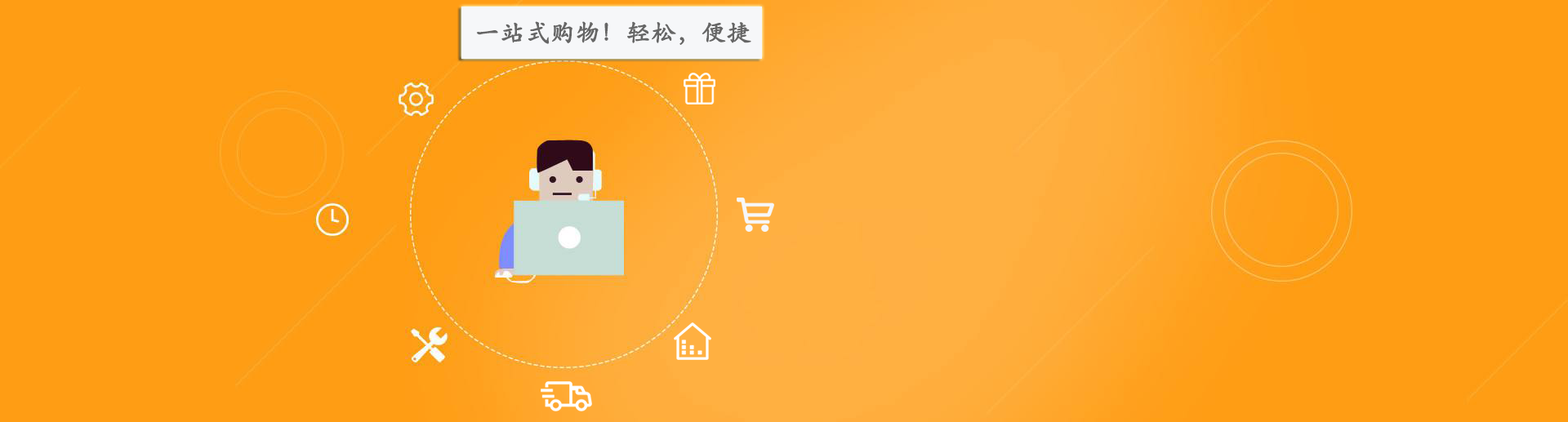
<style>
.page{position:relative;width:1568px;height:422px;background:#ff9d14}
.page>*{position:absolute;margin:0}
.t1{font:24.5px "STKaiti";color:#666666;font-weight:bold}
</style>
<div class="page">
<p class="t1" style="left:476px;top:21px;width:275px;height:24px">一站式购物！轻松，便捷</p>
</div>
